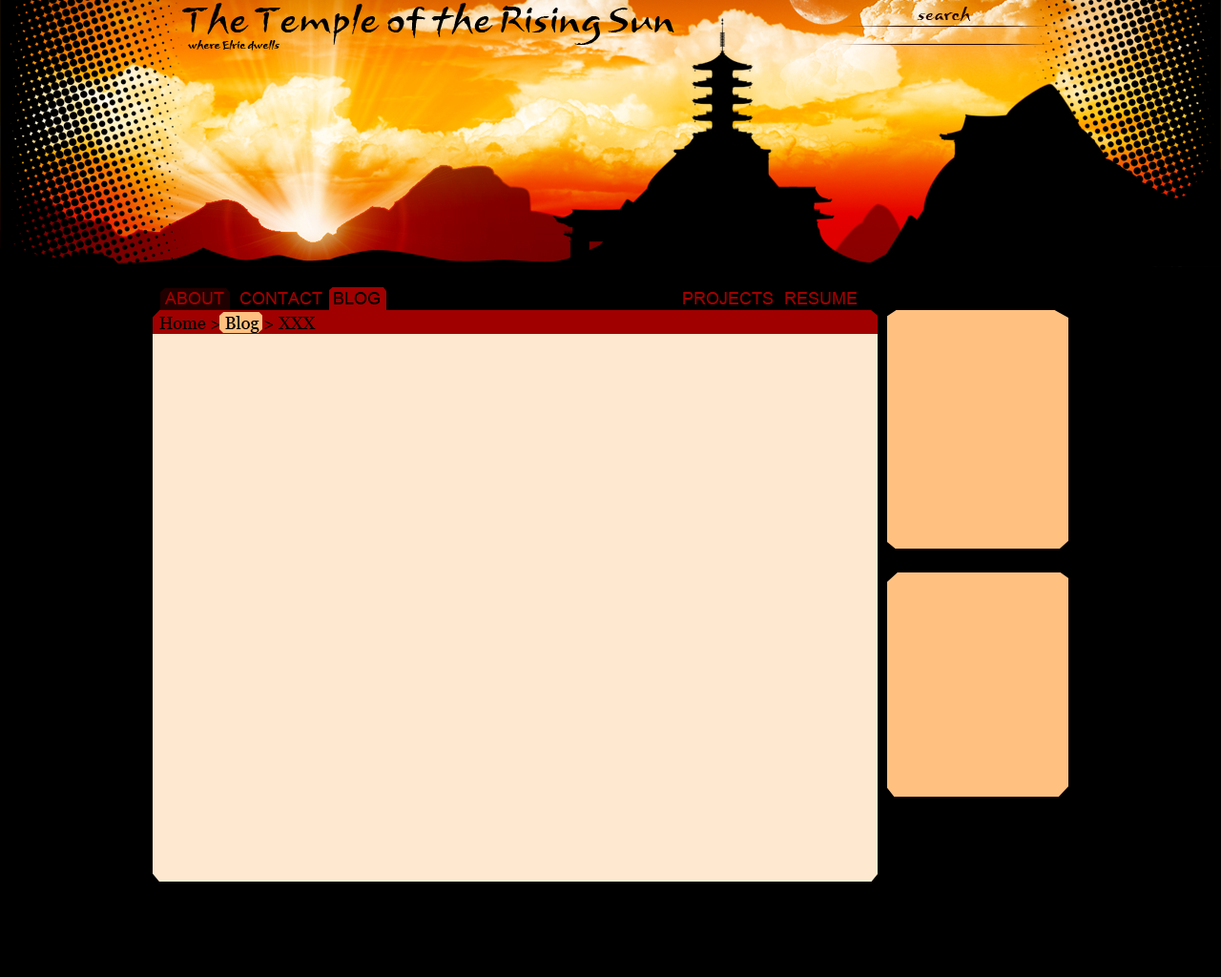
<style>
.page{position:relative;width:1221px;height:977px;background:#000000}
.page>*{position:absolute;margin:0}
.t1{font:17.2px "ArnovaITCTT";color:#200000}
.t2{font:17.2px "ArialMT";color:#a00000}
.t3{font:17.2px "ArialMT";color:#000000}
.t4{font:17.2px "Georgia";color:#000000}
</style>
<div class="page">
<p class="t1" style="left:917px;top:7px;width:53px;height:14px">search</p>
<p class="t2" style="left:164px;top:292px;width:60px;height:12px">ABOUT</p>
<p class="t2" style="left:239px;top:292px;width:83px;height:12px">CONTACT</p>
<p class="t3" style="left:334px;top:292px;width:46px;height:12px">BLOG</p>
<p class="t2" style="left:683px;top:292px;width:91px;height:12px">PROJECTS</p>
<p class="t2" style="left:785px;top:292px;width:72px;height:12px">RESUME</p>
<p class="t4" style="left:159px;top:316px;width:157px;height:17px">Home &gt; Blog &gt; XXX</p>
</div>
